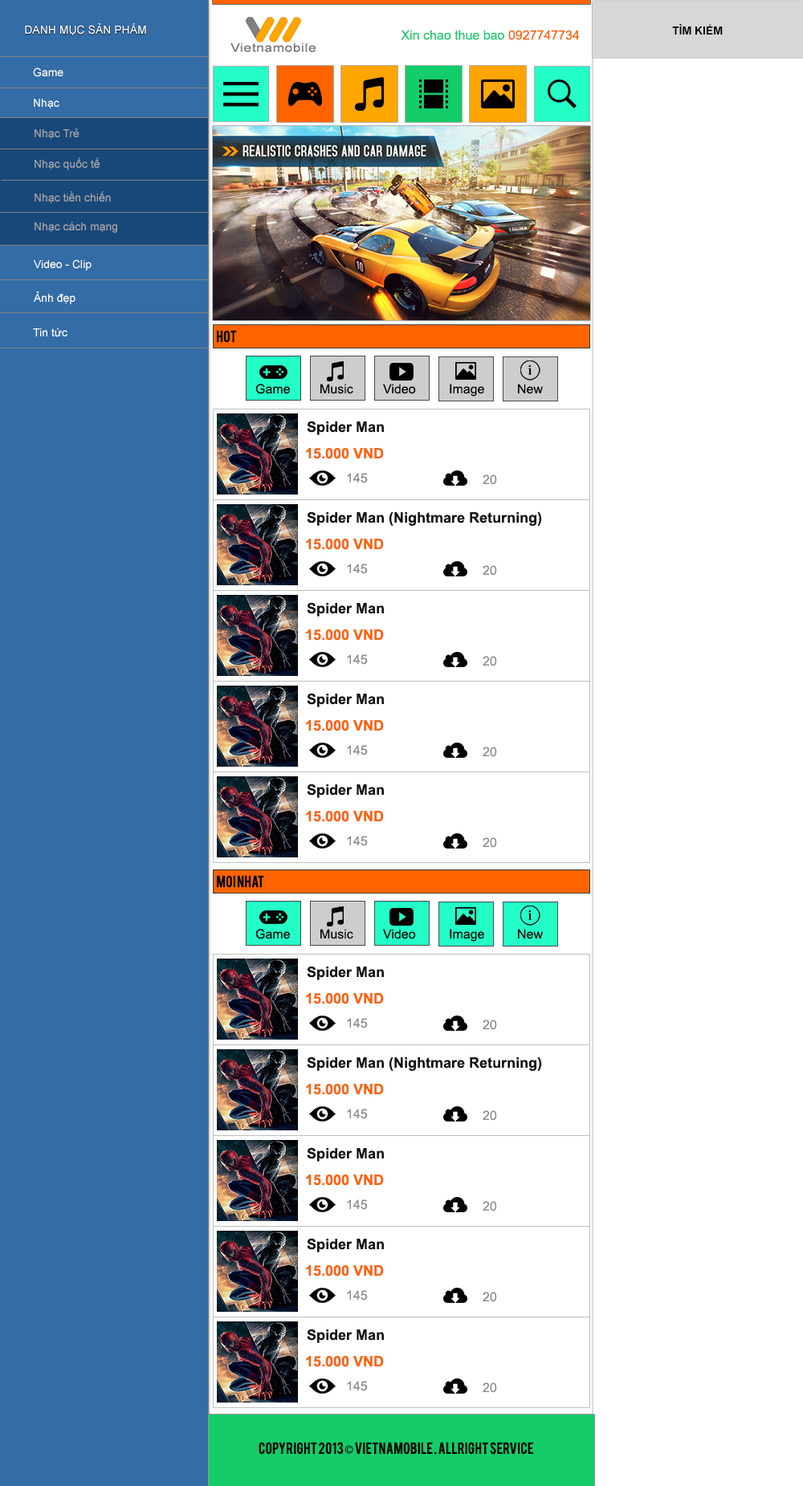
<style>
.page{position:relative;width:803px;height:1486px;background:#ffffff}
.page>*{position:absolute;margin:0}
.t1{font:11.2px "ArialMT";color:#ffffff}
.t2{font:12.8px "ArialMT";color:#14cc69}
.t3{font:12.8px "ArialMT";color:#ff6200}
.t4{font:11.2px "Arial-BoldMT";color:#000000}
.t5{font:11.2px "ArialMT";color:#a9a9a9}
.t6{font:12.8px "Bebas";color:#000000}
.t7{font:12.8px "ArialMT";color:#000000}
.t8{font:14.4px "Arial-BoldMT";color:#151515}
.t9{font:14.4px "Arial-BoldMT";color:#ff6200}
.t10{font:12.8px "ArialMT";color:#8d8d8d}
.t11{font:12.8px "MyriadPro-Regular";color:#000000}
</style>
<div class="page">
<p class="t1" style="left:25px;top:23px;width:121px;height:12px">DANH MỤC SẢN PHẨM</p>
<p class="t2" style="left:401px;top:30px;width:178px;height:10px">Xin chao thue bao <span class="t3">0927747734</span></p>
<p class="t4" style="left:672px;top:24px;width:50px;height:11px">TÌM KIẾM</p>
<p class="t1" style="left:33px;top:67px;width:30px;height:10px">Game</p>
<p class="t1" style="left:34px;top:99px;width:25px;height:9px">Nhạc</p>
<p class="t5" style="left:35px;top:128px;width:44px;height:11px">Nhạc Trẻ</p>
<p class="t5" style="left:35px;top:157px;width:65px;height:13px">Nhạc quốc tế</p>
<p class="t5" style="left:35px;top:191px;width:76px;height:12px">Nhạc tiền chiến</p>
<p class="t5" style="left:35px;top:222px;width:82px;height:11px">Nhạc cách mạng</p>
<p class="t1" style="left:34px;top:259px;width:57px;height:11px">Video - Clip</p>
<p class="t1" style="left:34px;top:291px;width:41px;height:13px">Ảnh đẹp</p>
<p class="t1" style="left:33px;top:327px;width:34px;height:10px">Tin tức</p>
<p class="t6" style="left:217px;top:330px;width:19px;height:13px">hot</p>
<p class="t7" style="left:255px;top:384px;width:35px;height:10px">Game</p>
<p class="t7" style="left:320px;top:384px;width:33px;height:10px">Music</p>
<p class="t7" style="left:383px;top:384px;width:33px;height:10px">Video</p>
<p class="t7" style="left:449px;top:384px;width:35px;height:12px">Image</p>
<p class="t7" style="left:518px;top:384px;width:25px;height:10px">New</p>
<p class="t8" style="left:307px;top:421px;width:77px;height:14px">Spider Man</p>
<p class="t9" style="left:306px;top:448px;width:78px;height:11px">15.000 VND</p>
<p class="t10" style="left:347px;top:473px;width:21px;height:10px">145</p>
<p class="t10" style="left:482px;top:474px;width:15px;height:11px">20</p>
<p class="t8" style="left:307px;top:511px;width:235px;height:15px">Spider Man (Nightmare Returning)</p>
<p class="t9" style="left:306px;top:539px;width:78px;height:11px">15.000 VND</p>
<p class="t10" style="left:347px;top:563px;width:21px;height:11px">145</p>
<p class="t10" style="left:482px;top:565px;width:15px;height:10px">20</p>
<p class="t8" style="left:307px;top:602px;width:77px;height:14px">Spider Man</p>
<p class="t9" style="left:306px;top:629px;width:78px;height:11px">15.000 VND</p>
<p class="t10" style="left:347px;top:654px;width:21px;height:11px">145</p>
<p class="t10" style="left:482px;top:656px;width:15px;height:10px">20</p>
<p class="t8" style="left:307px;top:693px;width:77px;height:14px">Spider Man</p>
<p class="t9" style="left:306px;top:720px;width:78px;height:11px">15.000 VND</p>
<p class="t10" style="left:347px;top:745px;width:21px;height:10px">145</p>
<p class="t10" style="left:482px;top:746px;width:15px;height:11px">20</p>
<p class="t8" style="left:307px;top:783px;width:77px;height:15px">Spider Man</p>
<p class="t9" style="left:306px;top:811px;width:78px;height:11px">15.000 VND</p>
<p class="t10" style="left:347px;top:836px;width:21px;height:10px">145</p>
<p class="t10" style="left:482px;top:837px;width:15px;height:11px">20</p>
<p class="t6" style="left:217px;top:875px;width:47px;height:13px">Moi NHat</p>
<p class="t7" style="left:255px;top:929px;width:35px;height:10px">Game</p>
<p class="t7" style="left:320px;top:929px;width:33px;height:10px">Music</p>
<p class="t7" style="left:383px;top:929px;width:33px;height:10px">Video</p>
<p class="t7" style="left:449px;top:929px;width:35px;height:12px">Image</p>
<p class="t7" style="left:518px;top:929px;width:25px;height:10px">New</p>
<p class="t8" style="left:307px;top:966px;width:77px;height:14px">Spider Man</p>
<p class="t9" style="left:306px;top:993px;width:78px;height:11px">15.000 VND</p>
<p class="t10" style="left:347px;top:1018px;width:21px;height:10px">145</p>
<p class="t10" style="left:482px;top:1019px;width:15px;height:11px">20</p>
<p class="t8" style="left:307px;top:1056px;width:235px;height:15px">Spider Man (Nightmare Returning)</p>
<p class="t9" style="left:306px;top:1084px;width:78px;height:11px">15.000 VND</p>
<p class="t10" style="left:347px;top:1108px;width:21px;height:11px">145</p>
<p class="t10" style="left:482px;top:1110px;width:15px;height:10px">20</p>
<p class="t8" style="left:307px;top:1147px;width:77px;height:14px">Spider Man</p>
<p class="t9" style="left:306px;top:1174px;width:78px;height:11px">15.000 VND</p>
<p class="t10" style="left:347px;top:1199px;width:21px;height:11px">145</p>
<p class="t10" style="left:482px;top:1201px;width:15px;height:10px">20</p>
<p class="t8" style="left:307px;top:1238px;width:77px;height:14px">Spider Man</p>
<p class="t9" style="left:306px;top:1265px;width:78px;height:11px">15.000 VND</p>
<p class="t10" style="left:347px;top:1290px;width:21px;height:10px">145</p>
<p class="t10" style="left:482px;top:1291px;width:15px;height:11px">20</p>
<p class="t8" style="left:307px;top:1328px;width:77px;height:15px">Spider Man</p>
<p class="t9" style="left:306px;top:1356px;width:78px;height:11px">15.000 VND</p>
<p class="t10" style="left:347px;top:1381px;width:21px;height:10px">145</p>
<p class="t10" style="left:482px;top:1382px;width:15px;height:11px">20</p>
<p class="t6" style="left:258px;top:1442px;width:275px;height:12px">Copyright 2013 <span class="t11">©</span> Vietnamobile . Allright service</p>
</div>
